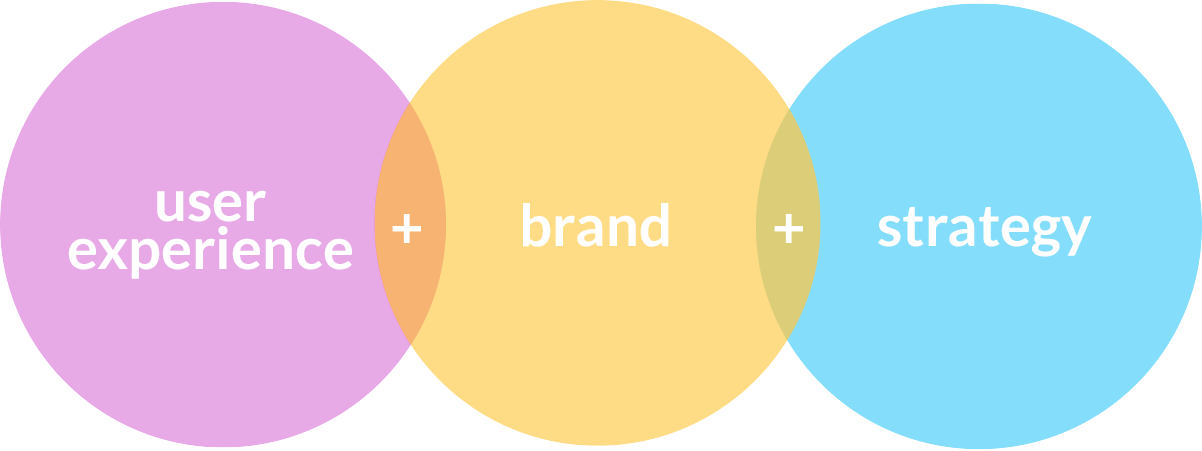
<style>
.page{position:relative;width:1202px;height:451px;background:#84ddfa}
.page>*{position:absolute;margin:0}
.t1{font:58px/48px "Lato-Bold";color:#ffffff}
.t2{font:58px "Lato-Bold";color:#ffffff}
</style>
<div class="page">
<p class="t1" style="left:68px;top:190px;width:284px;height:89px;text-align:center">user<br>experience</p>
<p class="t2" style="left:523px;top:203px;width:146px;height:44px">brand</p>
<p class="t2" style="left:878px;top:207px;width:214px;height:50px">strategy</p>
</div>
